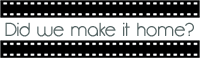
<style>
.page{position:relative;width:200px;height:58px;background:#000000}
.page>*{position:absolute;margin:0}
.t1{font:18.9px "Opificio-Rounded";color:#576666}
</style>
<div class="page">
<p class="t1" style="left:5px;top:22px;width:189px;height:15px">Did we make it home?</p>
</div>
